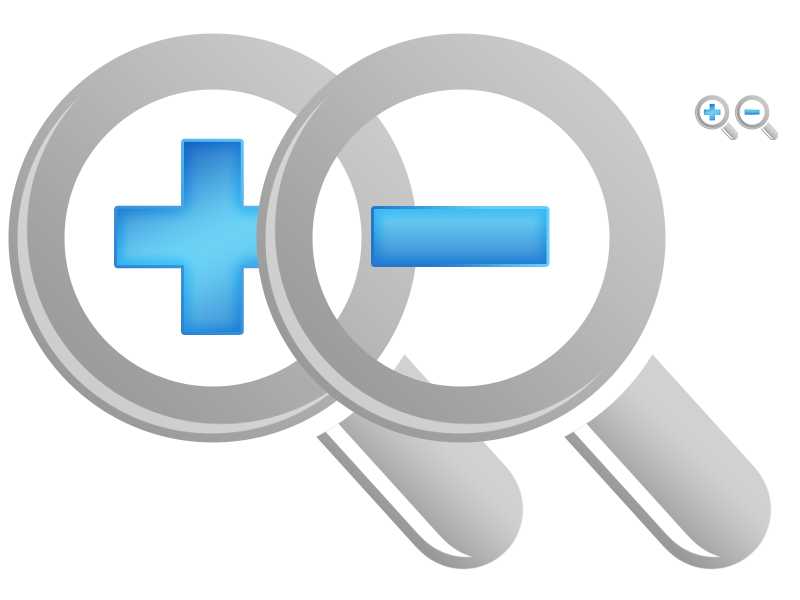
<style>
.page{position:relative;width:800px;height:600px;background:#ffffff}
.page>*{position:absolute;margin:0}
.t1{font:358px "Arial-Black";text-transform:uppercase}
</style>
<div class="page">
<p class="t1" style="left:117px;top:141px;width:191px;height:191px">+</p>
</div>
